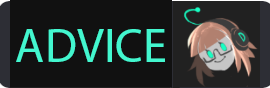
<style>
.page{position:relative;width:270px;height:88px;background:#111111}
.page>*{position:absolute;margin:0}
.t1{font:48px "MyriadPro-Regular";color:#43f7cf}
</style>
<div class="page">
<p class="t1" style="left:16px;top:29px;width:149px;height:33px">ADVICE</p>
</div>
